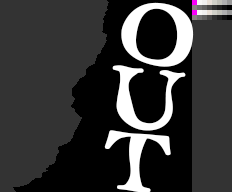
<style>
.page{position:relative;width:232px;height:192px;background:#333333}
.page>*{position:absolute;margin:0}
.t1{font:99.8px "ComicMysteryStd-DB";letter-spacing:-0.21em;color:#ffffff;scale:0.85 1}
.t2{font:99.8px "ComicMysteryStd-DB";letter-spacing:-0.21em;color:#ffffff;scale:0.81 1}
</style>
<div class="page">
<p class="t1" style="left:104px;top:2px;width:90px;height:191px;rotate:6deg">OU<span class="t2">T</span></p>
</div>
